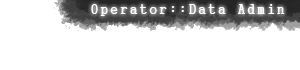
<style>
.page{position:relative;width:300px;height:70px;background:#ffffff}
.page>*{position:absolute;margin:0}
.t1{font:14px "GungsuhChe";letter-spacing:0.2em;color:#ffffff}
</style>
<div class="page">
<p class="t1" style="left:91px;top:4px;width:194px;height:12px">Operator::Data Admin</p>
</div>
